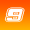
<style>
.page{position:relative;width:30px;height:30px}
.page>*{position:absolute;margin:0}
.t1{font:18px "AlienMushrooms";color:#ffffff;scale:1.5 1}
</style>
<div class="page">
<p class="t1" style="left:4px;top:7px;width:21px;height:16px">9</p>
</div>
